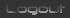
<style>
.page{position:relative;width:70px;height:18px;background:#333333}
.page>*{position:absolute;margin:0}
.t1{font:15px "NeuropolMedium"}
</style>
<div class="page">
<p class="t1" style="left:6px;top:4px;width:59px;height:11px">Logout</p>
</div>
